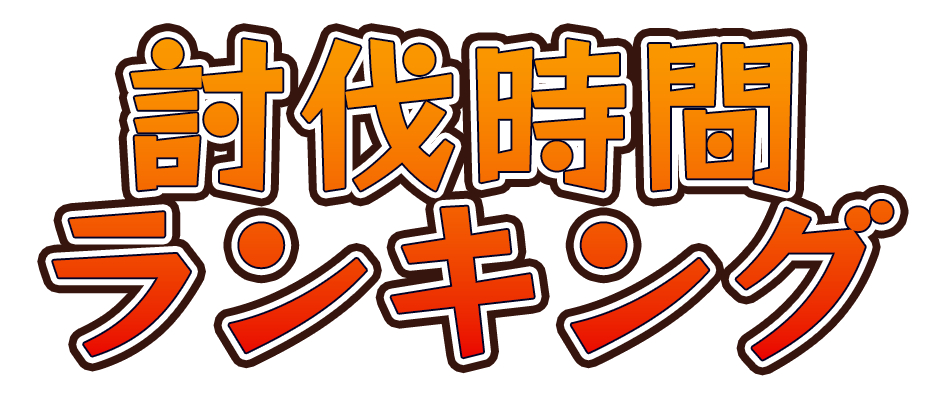
<style>
.page{position:relative;width:946px;height:398px;background:#ffffff}
.page>*{position:absolute;margin:0}
.t1{font:166.7px/166.7px "RocknRollOne-Regular";font-weight:bold}
</style>
<div class="page">
<p class="t1" style="left:53px;top:39px;width:840px;height:321px;text-align:center">討伐時間<br>ランキング</p>
</div>
